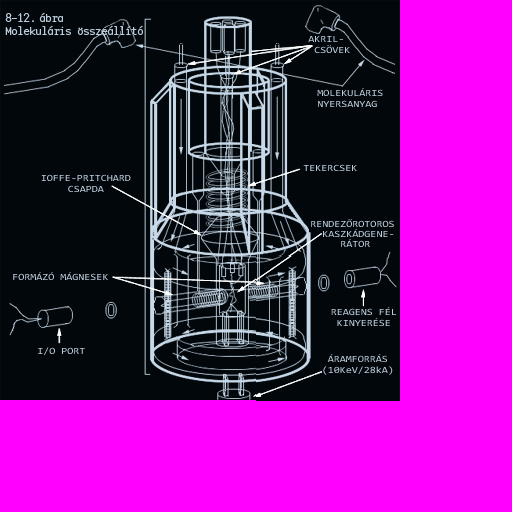
<style>
.page{position:relative;width:512px;height:512px;background:#02070b}
.page>*{position:absolute;margin:0}
.t1{font:11.2px/13px "BaseMonoNarrowThin";letter-spacing:-0.05em;color:#bbccda;scale:1.19 1}
.t2{font:9.6px/11px "Consolas";color:#bbccda;scale:1.14 1}
.t3{font:9.6px "Consolas";color:#bbccda;scale:1.14 1}
.t4{font:9.6px/10px "Consolas";color:#bbccda;scale:1.14 1}
</style>
<div class="page">
<p class="t1" style="left:5px;top:12px;width:138px;height:23px">8-12. ábra<br>Molekuláris összeállító</p>
<p class="t2" style="left:308px;top:36px;width:42px;height:17px">AKRIL-<br> CSÖVEK</p>
<p class="t2" style="left:317px;top:88px;width:66px;height:19px">MOLEKULÁRIS<br>NYERSANYAG</p>
<p class="t2" style="left:41px;top:174px;width:90px;height:18px;text-align:center">IOFFE-PRITCHARD<br>CSAPDA</p>
<p class="t3" style="left:303px;top:164px;width:54px;height:7px">TEKERCSEK</p>
<p class="t4" style="left:311px;top:219px;width:83px;height:28px">RENDEZŐROTOROS<br>      KASZKÁDGENE-<br>         RÁTOR</p>
<p class="t3" style="left:13px;top:272px;width:95px;height:8px">FORMÁZÓ MÁGNESEK</p>
<p class="t2" style="left:331px;top:307px;width:65px;height:19px;text-align:center">REAGENS FÉL<br>KINYERÉSE</p>
<p class="t3" style="left:38px;top:347px;width:47px;height:8px">I/O PORT</p>
<p class="t2" style="left:323px;top:354px;width:70px;height:21px;text-align:center">ÁRAMFORRÁS<br>(10KeV/28kA)</p>
</div>
